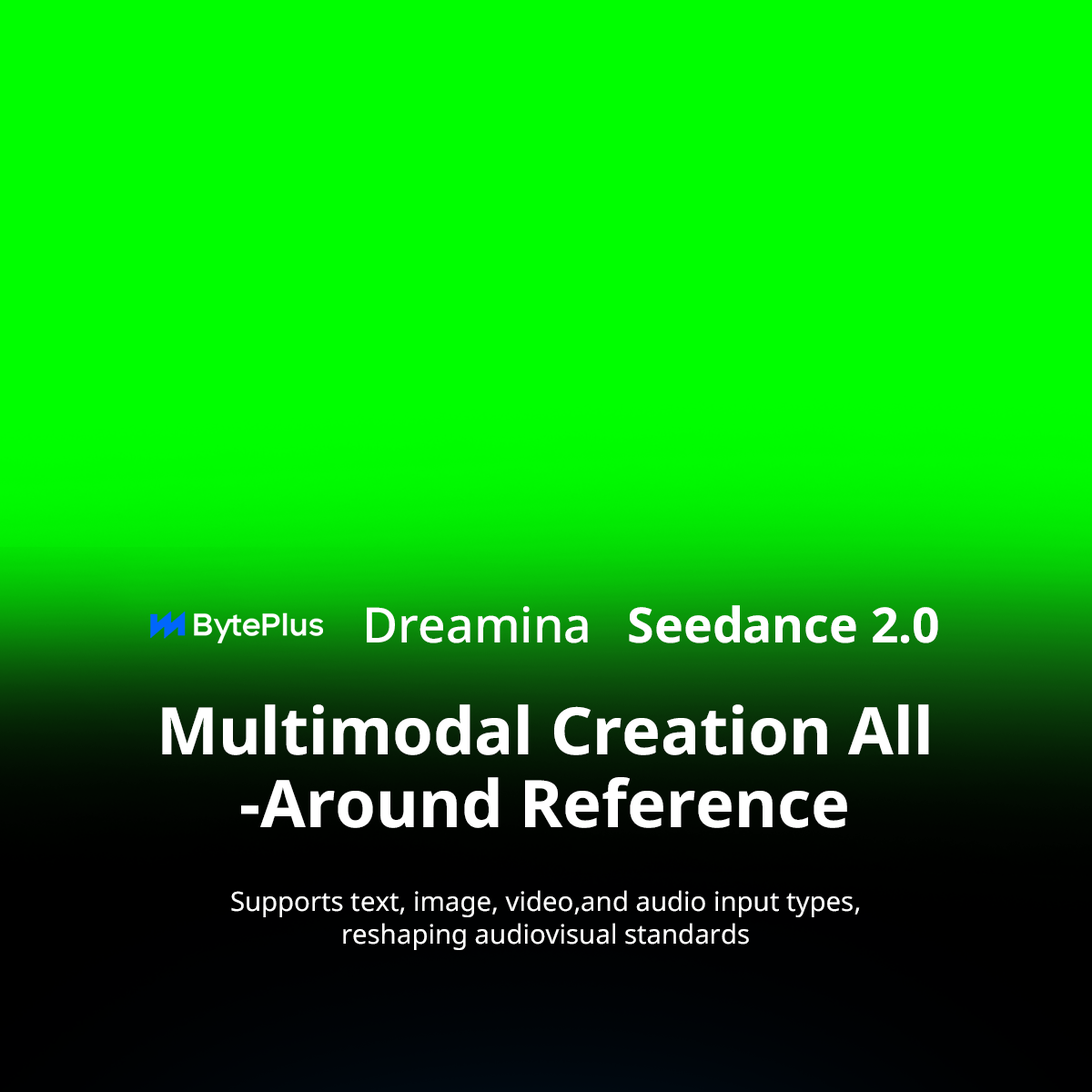
<style>
.page{position:relative;width:1092px;height:1092px;background:#00ff00}
.page>*{position:absolute;margin:0}
.t1{font:48.6px "NotoSans-Bold";color:#ffffff}
.t2{font:48.6px "NotoSans-Medium";color:#ffffff}
.t3{font:65.5px/72.8px "NotoSans-Bold";color:#ffffff}
.t4{font:26.7px/32.8px "NotoSans-Regular";color:#ffffff}
</style>
<div class="page">
<p class="t1" style="left:629px;top:605px;width:309px;height:38px">Seedance 2.0</p>
<p class="t2" style="left:367px;top:606px;width:221px;height:37px">Dreamina</p>
<p class="t3" style="left:162px;top:704px;width:767px;height:124px;text-align:center">Multimodal Creation All<br>-Around Reference</p>
<p class="t4" style="left:231px;top:890px;width:629px;height:60px;text-align:center">Supports text, image, video,and audio input types,<br>reshaping audiovisual standards</p>
</div>
